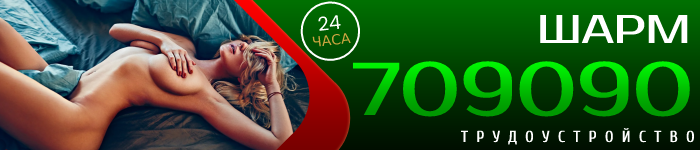
<style>
.page{position:relative;width:700px;height:150px}
.page>*{position:absolute;margin:0}
.t1{font:19.2px "Poppins-Regular";color:#ffffff;text-transform:uppercase}
.t2{font:40.1px "ProstoOne-Regular";color:#ffffff;text-transform:uppercase}
.t3{font:14px "DejaVuSans";color:#cda540;text-transform:uppercase}
.t4{font:74.6px "ProstoOne-Regular";text-transform:uppercase}
.t5{font:16px "Cuprum-Regular";letter-spacing:0.5em;color:#ffffff;text-transform:uppercase;font-weight:bold}
</style>
<div class="page">
<p class="t1" style="left:318px;top:15px;width:23px;height:16px;rotate:-6deg">24</p>
<p class="t2" style="left:540px;top:14px;width:148px;height:30px">ШАРМ</p>
<p class="t3" style="left:312px;top:33px;width:39px;height:14px;rotate:-6deg">часа</p>
<p class="t4" style="left:352px;top:61px;width:338px;height:56px">709090</p>
<p class="t5" style="left:461px;top:128px;width:233px;height:17px">Трудоустройство</p>
</div>
